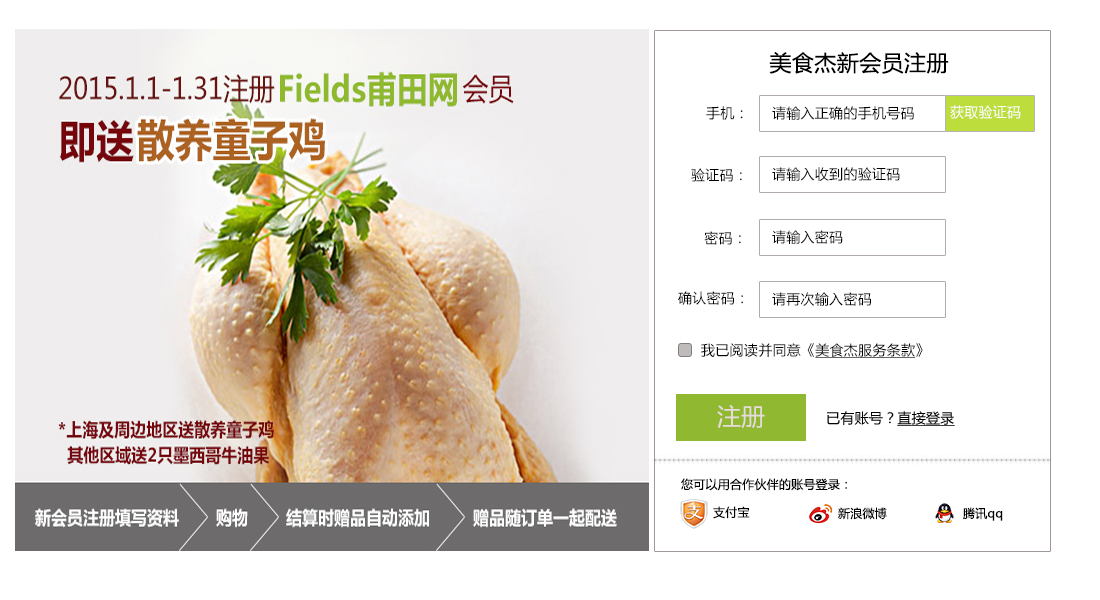
<style>
.page{position:relative;width:1100px;height:600px;background:#ffffff}
.page>*{position:absolute;margin:0}
.t1{font:22px "MicrosoftYaHei";letter-spacing:0.02em;color:#000000}
.t2{font:14px "MicrosoftYaHei";letter-spacing:0.02em;color:#000000}
.t3{font:14px "MicrosoftYaHei";letter-spacing:0.02em;color:#ffffff}
.t4{font:14px "MicrosoftYaHei";letter-spacing:0.02em;color:#000000;text-decoration:underline}
.t5{font:24px "MicrosoftYaHei";letter-spacing:0.02em;color:#e7dcdc}
.t6{font:12px "MicrosoftYaHei";letter-spacing:0.02em;color:#000000}
</style>
<div class="page">
<p class="t1" style="left:769px;top:52px;width:180px;height:22px">美食杰新会员注册</p>
<p class="t2" style="left:706px;top:106px;width:37px;height:14px">手机：</p>
<p class="t2" style="left:772px;top:106px;width:142px;height:14px">请输入正确的手机号码</p>
<p class="t3" style="left:950px;top:105px;width:71px;height:14px">获取验证码</p>
<p class="t2" style="left:691px;top:168px;width:51px;height:14px">验证码：</p>
<p class="t2" style="left:772px;top:167px;width:128px;height:14px">请输入收到的验证码</p>
<p class="t2" style="left:704px;top:231px;width:37px;height:14px">密码：</p>
<p class="t2" style="left:772px;top:230px;width:71px;height:14px">请输入密码</p>
<p class="t2" style="left:678px;top:291px;width:65px;height:14px">确认密码：</p>
<p class="t2" style="left:772px;top:292px;width:99px;height:14px">请再次输入密码</p>
<p class="t2" style="left:701px;top:343px;width:222px;height:15px">我已阅读并同意《<span class="t4">美食杰服务条款</span>》</p>
<p class="t5" style="left:717px;top:404px;width:48px;height:25px">注册</p>
<p class="t6" style="left:681px;top:478px;width:166px;height:13px">您可以用合作伙伴的账号登录：</p>
<p class="t6" style="left:713px;top:506px;width:37px;height:13px">支付宝</p>
<p class="t6" style="left:838px;top:507px;width:49px;height:13px">新浪微博</p>
<p class="t6" style="left:963px;top:507px;width:40px;height:14px">腾讯qq</p>
</div>
